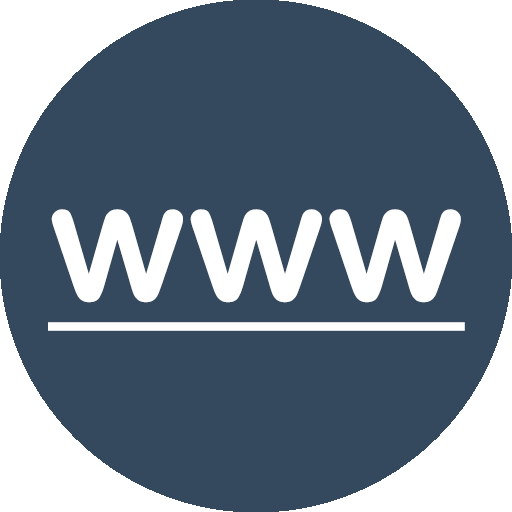
<style>
.page{position:relative;width:512px;height:512px;background:#34495e}
.page>*{position:absolute;margin:0}
.t1{font:170.8px "ArialRoundedMTBold";color:#ffffff;text-decoration:underline}
</style>
<div class="page">
<p class="t1" style="left:48px;top:209px;width:417px;height:122px">www</p>
</div>
